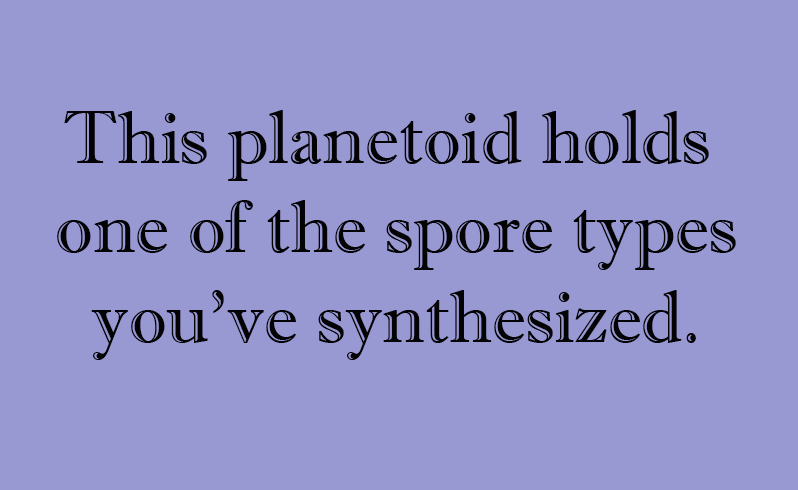
<style>
.page{position:relative;width:798px;height:490px;background:#9898d3}
.page>*{position:absolute;margin:0}
.t1{font:74.8px "ImprintMT-Shadow";color:#030303}
</style>
<div class="page">
<p class="t1" style="left:57px;top:110px;width:679px;height:250px;text-align:center">This planetoid holds <br>one of the spore types<br>you’ve synthesized.</p>
</div>
